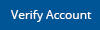
<style>
.page{position:relative;width:100px;height:30px;background:#005596}
.page>*{position:absolute;margin:0}
.t1{font:12px "OpenSans";color:#ffffff}
</style>
<div class="page">
<p class="t1" style="left:11px;top:10px;width:81px;height:12px">Verify Account</p>
</div>
